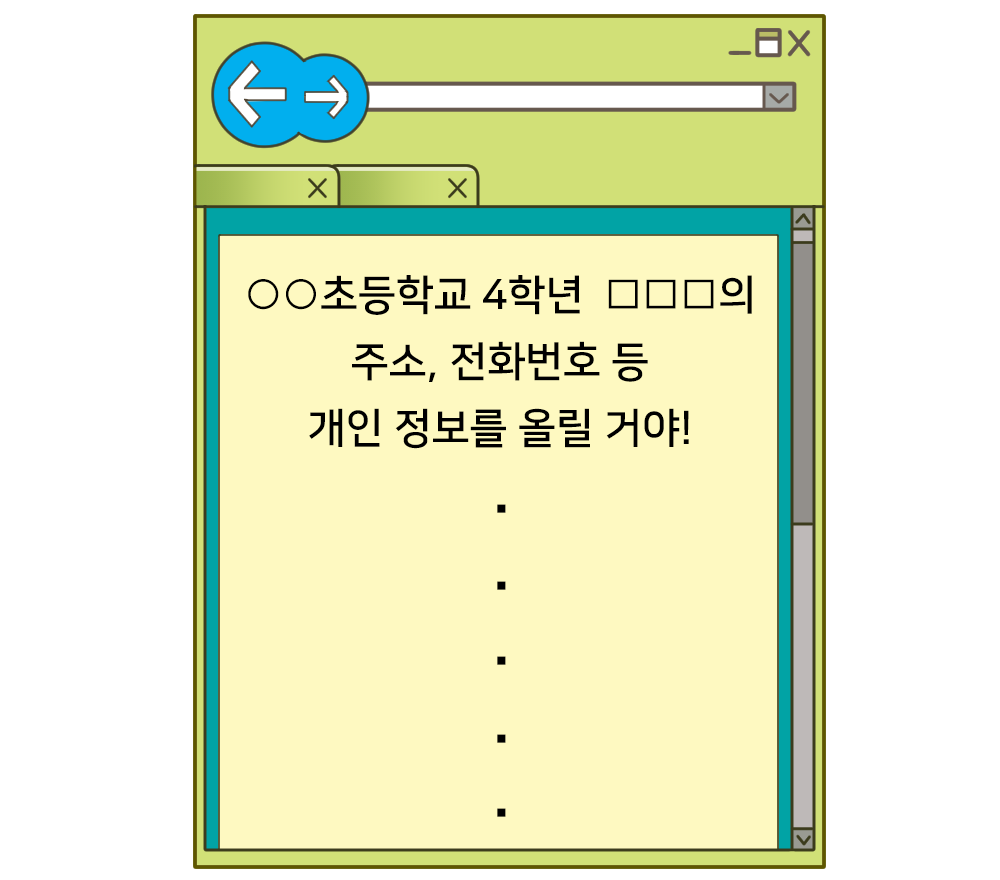
<style>
.page{position:relative;width:1000px;height:880px;background:#ffffff}
.page>*{position:absolute;margin:0}
.t1{font:41.7px/66.7px "NanumSquareB";color:#000000}
.t2{font:70.8px "NanumSquareB";color:#000000}
</style>
<div class="page">
<p class="t1" style="left:248px;top:275px;width:504px;height:174px;text-align:center">○○초등학교 4학년  □□□의<br>주소, 전화번호 등<br>개인 정보를 올릴 거야!</p>
<p class="t2" style="left:497px;top:504px;width:9px;height:9px">.</p>
<p class="t2" style="left:497px;top:581px;width:9px;height:9px">.</p>
<p class="t2" style="left:497px;top:656px;width:9px;height:9px">.</p>
<p class="t2" style="left:497px;top:734px;width:9px;height:9px">.</p>
<p class="t2" style="left:497px;top:808px;width:9px;height:9px">.</p>
</div>
